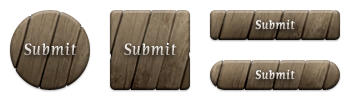
<style>
.page{position:relative;width:350px;height:100px;background:#ffffff}
.page>*{position:absolute;margin:0}
.t1{font:12px "CommunistItalic"}
.t2{font:16px "CommunistItalic"}
</style>
<div class="page">
<p class="t1" style="left:255px;top:19px;width:40px;height:11px">Submit</p>
<p class="t2" style="left:24px;top:42px;width:53px;height:13px">Submit</p>
<p class="t2" style="left:124px;top:42px;width:53px;height:13px">Submit</p>
<p class="t1" style="left:255px;top:69px;width:40px;height:11px">Submit</p>
</div>
